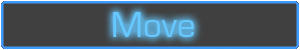
<style>
.page{position:relative;width:300px;height:50px;background:#404040}
.page>*{position:absolute;margin:0}
.t1{font:37.4px "EurostileRegular";color:#67c8ff}
</style>
<div class="page">
<p class="t1" style="left:113px;top:12px;width:81px;height:25px">Move</p>
</div>
